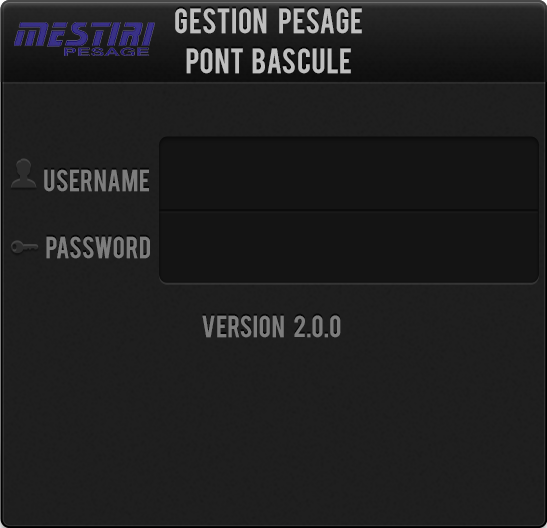
<style>
.page{position:relative;width:547px;height:528px;background:#1f1f1f}
.page>*{position:absolute;margin:0}
.t1{font:27.3px/40.1px "Bebas";color:#bfbfbf}
.t2{font:23.7px "Bebas";color:#7d7d7d}
</style>
<div class="page">
<p class="t1" style="left:175px;top:8px;width:187px;height:66px;text-align:center">Gestion    Pesage<br>pont   bascule</p>
<p class="t2" style="left:44px;top:169px;width:105px;height:23px">username</p>
<p class="t2" style="left:46px;top:236px;width:104px;height:23px">password</p>
<p class="t2" style="left:202px;top:315px;width:139px;height:23px">version    2.0.0</p>
</div>
